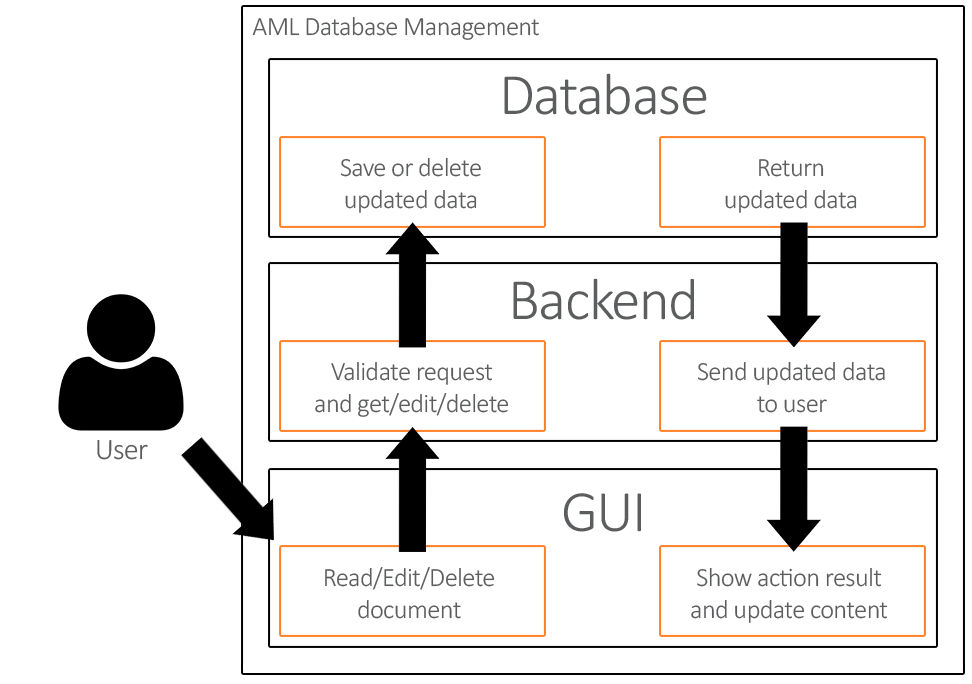
<style>
.page{position:relative;width:972px;height:684px;background:#ffffff}
.page>*{position:absolute;margin:0}
.t1{font:26.4px "Calibri-Light";letter-spacing:-0.025em;color:#5c5d5f}
.t2{font:59.1px "Calibri-Light";letter-spacing:-0.025em;color:#5c5d5f}
.t3{font:30px "Calibri-Light";letter-spacing:-0.025em;color:#5c5d5f}
.t4{font:26.5px "Calibri-Light";letter-spacing:-0.025em;color:#5c5d5f}
</style>
<div class="page">
<p class="t1" style="left:252px;top:16px;width:287px;height:24px">AML Database Management</p>
<p class="t2" style="left:504px;top:73px;width:203px;height:42px">Database</p>
<p class="t1" style="left:341px;top:157px;width:140px;height:56px;text-align:center">Save or delete<br>updated data</p>
<p class="t1" style="left:725px;top:159px;width:132px;height:54px;text-align:center">Return<br>updated data</p>
<p class="t2" style="left:513px;top:278px;width:181px;height:42px">Backend</p>
<p class="t1" style="left:315px;top:362px;width:194px;height:55px;text-align:center">Validate request<br>and get/edit/delete</p>
<p class="t1" style="left:698px;top:361px;width:187px;height:52px;text-align:center">Send updated data<br>to user</p>
<p class="t3" style="left:97px;top:439px;width:51px;height:21px">User</p>
<p class="t2" style="left:564px;top:493px;width:77px;height:39px">GUI</p>
<p class="t4" style="left:325px;top:567px;width:170px;height:52px;text-align:center">Read/Edit/Delete<br>document</p>
<p class="t4" style="left:691px;top:567px;width:197px;height:56px;text-align:center">Show action result<br>and update content</p>
</div>
